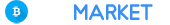
<style>
.page{position:relative;width:170px;height:25px;background:#ffffff}
.page>*{position:absolute;margin:0}
.t1{font:20.8px "Somatic-Rounded";color:#398ff5}
.t2{font:20.8px "Somatic-Rounded";color:#ffffff}
</style>
<div class="page">
<p class="t1" style="left:33px;top:4px;width:120px;height:16px"><span class="t2">BTC</span>MARKET</p>
</div>
